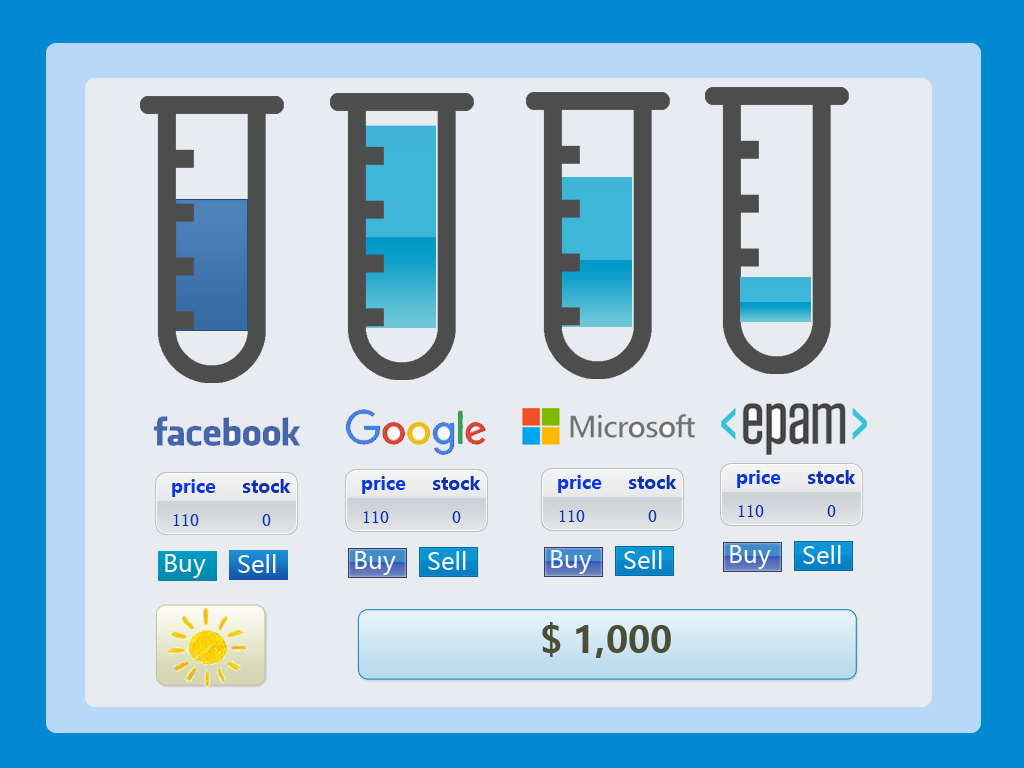
<style>
.page{position:relative;width:1024px;height:768px;background:#e8ecf1}
.page>*{position:absolute;margin:0}
.t1{font:18px "MicrosoftYaHei-Bold";color:#0836e1}
.t2{font:18px "MicrosoftYaHei-Bold";color:#0d31b5}
.t3{font:18px "SimSun";color:#0d31b5}
.t4{font:24px "MicrosoftYaHei";color:#f6f7fb}
.t5{font:24px "MicrosoftYaHei";color:#f5f6fb}
.t6{font:36px "MicrosoftYaHei-Bold";color:#4d4e38}
</style>
<div class="page">
<p class="t1" style="left:737px;top:470px;width:44px;height:18px">price</p>
<p class="t2" style="left:808px;top:470px;width:48px;height:14px">stock</p>
<p class="t1" style="left:172px;top:479px;width:44px;height:18px">price</p>
<p class="t2" style="left:243px;top:479px;width:48px;height:14px">stock</p>
<p class="t1" style="left:362px;top:476px;width:44px;height:18px">price</p>
<p class="t2" style="left:433px;top:476px;width:48px;height:14px">stock</p>
<p class="t1" style="left:558px;top:475px;width:44px;height:18px">price</p>
<p class="t2" style="left:629px;top:475px;width:48px;height:14px">stock</p>
<p class="t3" style="left:559px;top:510px;width:98px;height:12px">110       0</p>
<p class="t3" style="left:738px;top:505px;width:98px;height:12px">110       0</p>
<p class="t3" style="left:173px;top:514px;width:98px;height:12px">110       0</p>
<p class="t3" style="left:363px;top:511px;width:98px;height:12px">110       0</p>
<p class="t4" style="left:730px;top:545px;width:41px;height:24px">Buy</p>
<p class="t5" style="left:803px;top:545px;width:38px;height:19px">Sell</p>
<p class="t4" style="left:165px;top:554px;width:41px;height:24px">Buy</p>
<p class="t5" style="left:238px;top:554px;width:38px;height:19px">Sell</p>
<p class="t4" style="left:355px;top:551px;width:41px;height:24px">Buy</p>
<p class="t5" style="left:428px;top:551px;width:38px;height:19px">Sell</p>
<p class="t4" style="left:551px;top:550px;width:41px;height:24px">Buy</p>
<p class="t5" style="left:624px;top:550px;width:38px;height:19px">Sell</p>
<p class="t6" style="left:542px;top:622px;width:129px;height:36px">$ 1,000</p>
</div>
